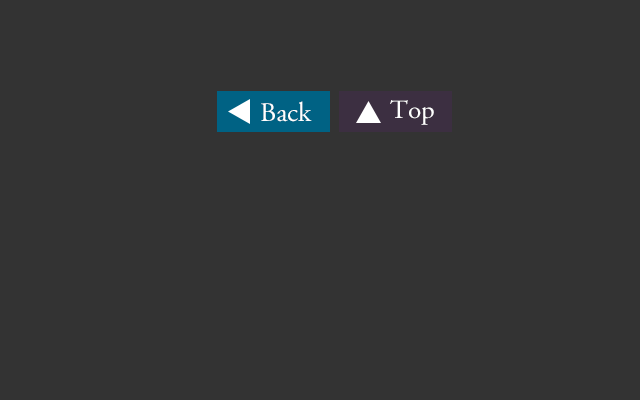
<style>
.page{position:relative;width:640px;height:400px;background:#333333}
.page>*{position:absolute;margin:0}
.t1{font:27px "AGaramondPro-Regular";color:#ffffff}
.t2{font:26px "AGaramondPro-Regular";color:#ffffff;scale:1.04 1}
</style>
<div class="page">
<p class="t1" style="left:261px;top:101px;width:51px;height:21px">Back</p>
<p class="t2" style="left:390px;top:100px;width:44px;height:25px">Top</p>
</div>
